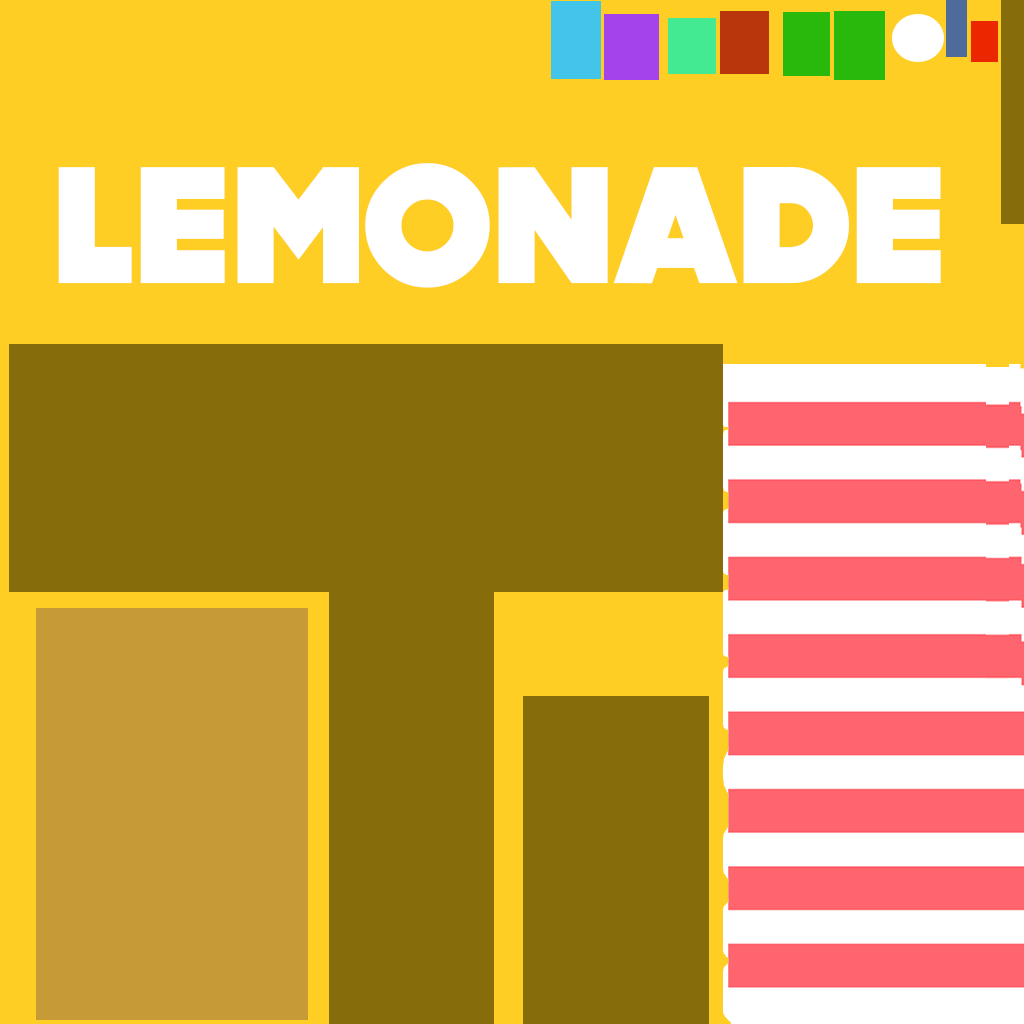
<style>
.page{position:relative;width:1024px;height:1024px;background:#ffce25}
.page>*{position:absolute;margin:0}
.t1{font:166.8px "DOCK11-Heavy";color:#ffffff}
</style>
<div class="page">
<p class="t1" style="left:58px;top:163px;width:883px;height:125px">LEMONADE</p>
</div>
